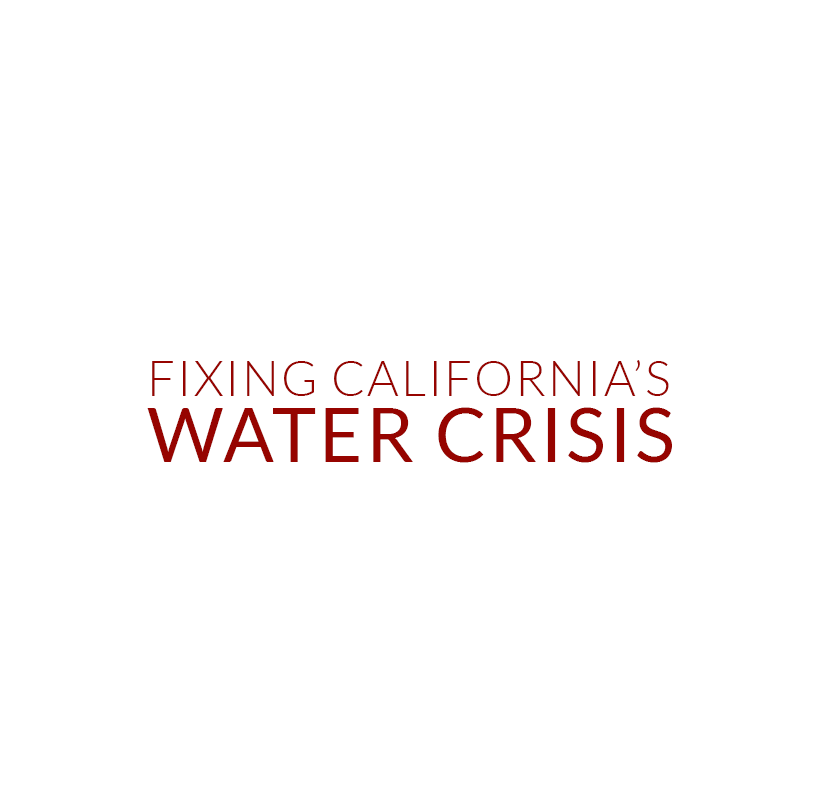
<style>
.page{position:relative;width:836px;height:800px;background:#ffffff}
.page>*{position:absolute;margin:0}
.t1{font:49px/66px "Lato-Light";letter-spacing:0.04em;color:#960400}
.t2{font:75px/66px "Lato-Regular";letter-spacing:0.04em;color:#960400}
</style>
<div class="page">
<p class="t1" style="left:147px;top:360px;width:525px;height:103px">FIXING CALIFORNIA’S<br><span class="t2">WATER CRISIS</span></p>
</div>
